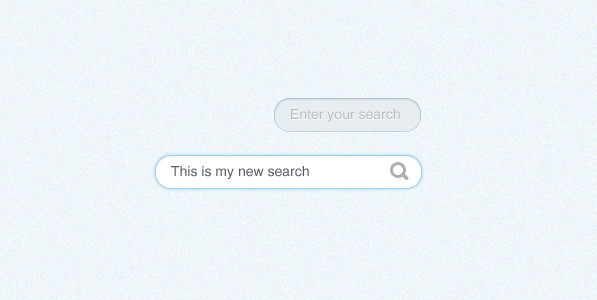
<style>
.page{position:relative;width:597px;height:300px}
.page>*{position:absolute;margin:0}
.t1{font:14px "HelveticaCE-Regular";color:#b4bdc4}
.t2{font:14px "HelveticaCE-Regular";color:#565e63}
</style>
<div class="page">
<p class="t1" style="left:291px;top:109px;width:109px;height:13px">Enter your search</p>
<p class="t2" style="left:171px;top:166px;width:138px;height:13px">This is my new search</p>
</div>
